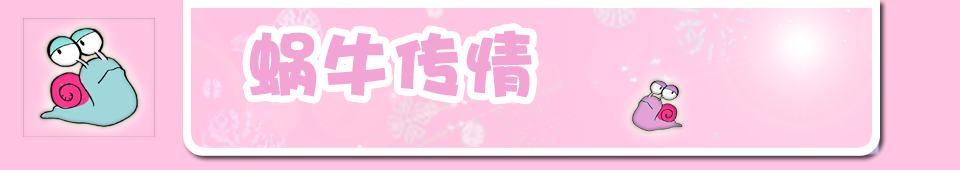
<style>
.page{position:relative;width:960px;height:170px;background:#ffc4e1}
.page>*{position:absolute;margin:0}
.t1{font:72px "DFPHaiBaoW12";color:#f2a5d5}
</style>
<div class="page">
<p class="t1" style="left:249px;top:30px;width:283px;height:68px">蜗牛传情</p>
<p class="t1" style="left:249px;top:30px;width:283px;height:68px">蜗牛传情</p>
</div>
